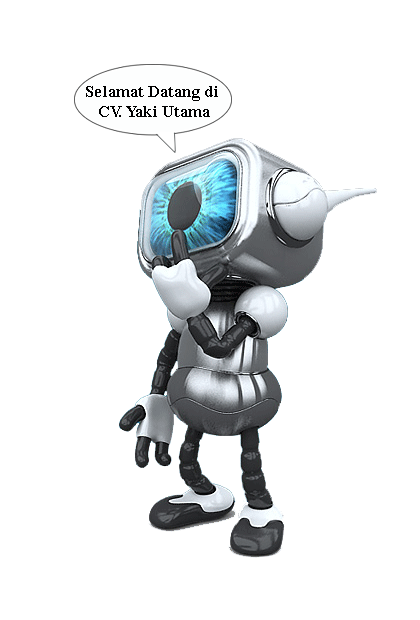
<style>
.page{position:relative;width:420px;height:620px;background:#ffffff}
.page>*{position:absolute;margin:0}
.t1{font:16.7px "TimesNewRomanPS-BoldMT";color:#000000}
</style>
<div class="page">
<p class="t1" style="left:86px;top:86px;width:132px;height:31px;text-align:center">Selamat Datang di <br>CV. Yaki Utama</p>
</div>
